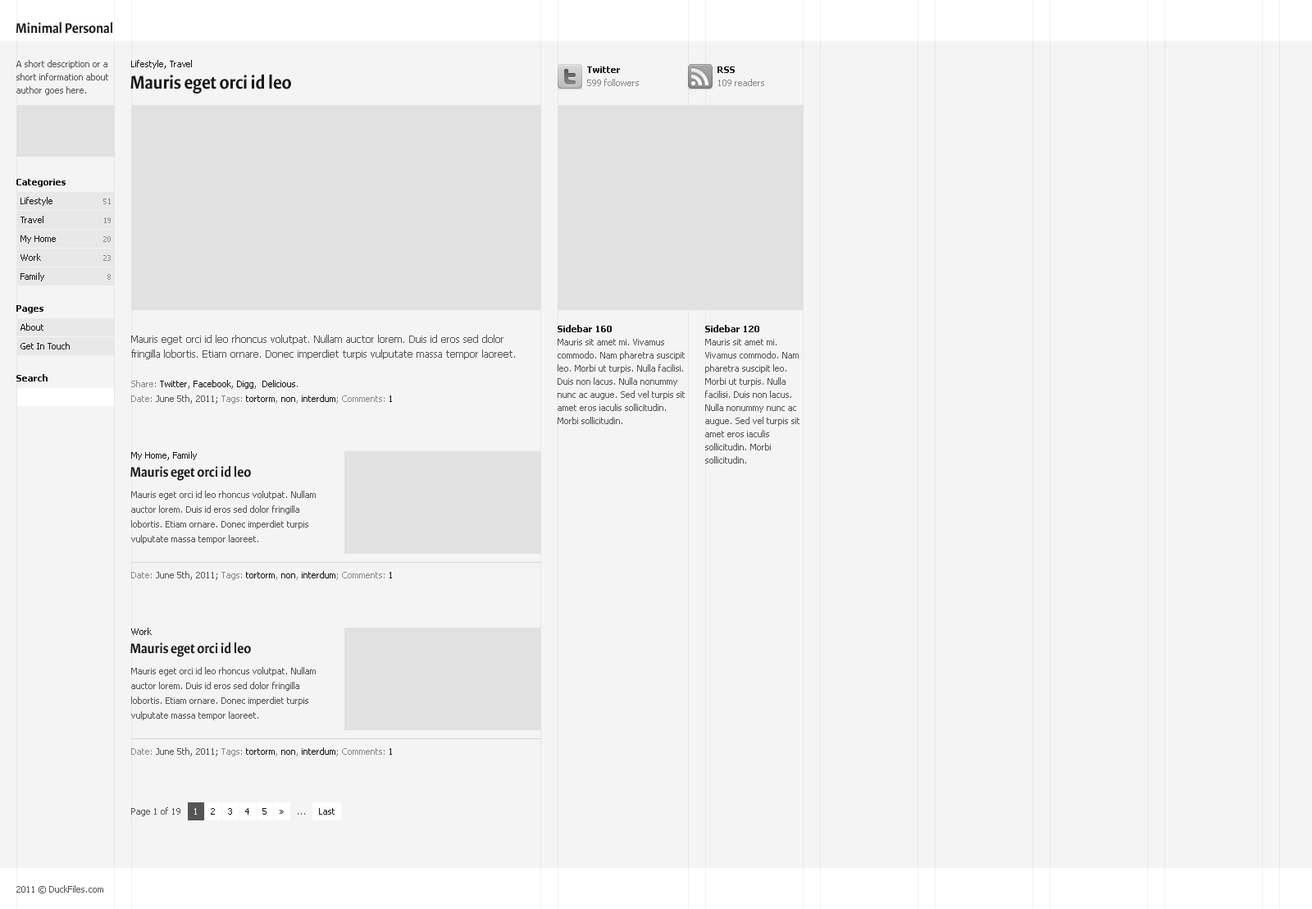
<style>
.page{position:relative;width:1312px;height:909px;background:#f4f4f4}
.page>*{position:absolute;margin:0}
.t1{font:14.8px "VersaSansCon-SemiBold-Regular";color:#191919}
.t2{font:9px/13.1px "Tahoma";color:#555555}
.t3{font:9px/13.1px "Tahoma-Bold";color:#191919}
.t4{font:9px/18.9px "Tahoma";color:#191919}
.t5{font:9px/18.9px "Tahoma-Bold";color:#191919}
.t6{font:9px "Tahoma";color:#191919}
.t7{font:19.7px "VersaSansCon-SemiBold-Regular";color:#191919}
.t8{font:9px/13.1px "Tahoma";color:#888888}
.t9{font:8.2px/18.9px "Tahoma";color:#888888}
.t10{font:9.8px/14.8px "Tahoma";color:#555555}
.t11{font:9px/14.8px "Tahoma";color:#888888}
.t12{font:9px/14.8px "Tahoma";color:#191919}
.t13{font:9px/14.8px "Tahoma";color:#555555}
.t14{font:9px "Tahoma";color:#888888}
.t15{font:9px "Tahoma";color:#555555}
.t16{font:9px "Tahoma";color:#ffffff}
</style>
<div class="page">
<p class="t1" style="left:16px;top:22px;width:97px;height:12px">Minimal Personal</p>
<p class="t2" style="left:16px;top:60px;width:92px;height:321px">A short description or a <br>short information about <br>author goes here.<br><br><span class="t3"><br><br><br><br><br>Categories<br></span><span class="t4">Lifestyle<br>Travel<br>My Home<br>Work<br>Family<br><br></span><span class="t5">Pages<br></span><span class="t4">About<br>Get In Touch<br><br></span><span class="t5">Search</span></p>
<p class="t6" style="left:131px;top:60px;width:61px;height:9px">Lifestyle, Travel</p>
<p class="t7" style="left:130px;top:74px;width:161px;height:19px">Mauris eget orci id leo</p>
<p class="t8" style="left:587px;top:66px;width:52px;height:20px"><span class="t3">Twitter<br></span>599 followers</p>
<p class="t8" style="left:718px;top:66px;width:46px;height:20px"><span class="t3">RSS</span><br>109 readers</p>
<p class="t9" style="left:103px;top:198px;width:8px;height:82px;text-align:right">51<br>19<br>20<br>23<br>8</p>
<p class="t2" style="left:558px;top:325px;width:127px;height:99px"><span class="t3">Sidebar 160<br></span>Mauris sit amet mi. Vivamus commodo. Nam pharetra suscipit leo. Morbi ut turpis. Nulla facilisi. Duis non lacus. Nulla nonummy nunc ac augue. Sed vel turpis sit amet eros iaculis sollicitudin. Morbi sollicitudin.</p>
<p class="t2" style="left:705px;top:325px;width:95px;height:138px"><span class="t3">Sidebar 120<br></span>Mauris sit amet mi. Vivamus commodo. Nam pharetra suscipit leo. Morbi ut turpis. Nulla facilisi. Duis non lacus. Nulla nonummy nunc ac augue. Sed vel turpis sit amet eros iaculis sollicitudin. Morbi sollicitudin.</p>
<p class="t10" style="left:131px;top:335px;width:384px;height:69px">Mauris eget orci id leo rhoncus volutpat. Nullam auctor lorem. Duis id eros sed dolor <br>fringilla lobortis. Etiam ornare. Donec imperdiet turpis vulputate massa tempor laoreet. <br><br><span class="t11">Share: </span><span class="t12">Twitter</span><span class="t13">,</span><span class="t12"> Facebook</span><span class="t13">,</span><span class="t12"> Digg</span><span class="t13">,</span><span class="t12">  Delicious</span><span class="t13">.<br></span><span class="t14">Date: </span><span class="t15">June 5th, 2011</span><span class="t13">; </span><span class="t14">Tags: </span><span class="t6">tortorm</span><span class="t14">, </span><span class="t6">non</span><span class="t14">, </span><span class="t6">interdum</span><span class="t14">; </span><span class="t11">Comments: </span><span class="t12">1</span></p>
<p class="t6" style="left:131px;top:451px;width:66px;height:9px">My Home, Family</p>
<p class="t1" style="left:130px;top:466px;width:121px;height:15px">Mauris eget orci id leo</p>
<p class="t13" style="left:131px;top:490px;width:185px;height:54px">Mauris eget orci id leo rhoncus volutpat. Nullam <br>auctor lorem. Duis id eros sed dolor fringilla <br>lobortis. Etiam ornare. Donec imperdiet turpis <br>vulputate massa tempor laoreet.</p>
<p class="t15" style="left:131px;top:571px;width:261px;height:9px"><span class="t14">Date: </span>June 5th, 2011; <span class="t14">Tags: </span><span class="t6">tortorm</span><span class="t14">, </span><span class="t6">non</span><span class="t14">, </span><span class="t6">interdum</span><span class="t14">; </span><span class="t14">Comments: </span><span class="t6">1</span></p>
<p class="t6" style="left:131px;top:627px;width:21px;height:8px">Work</p>
<p class="t1" style="left:130px;top:642px;width:121px;height:15px">Mauris eget orci id leo</p>
<p class="t13" style="left:131px;top:667px;width:185px;height:53px">Mauris eget orci id leo rhoncus volutpat. Nullam <br>auctor lorem. Duis id eros sed dolor fringilla <br>lobortis. Etiam ornare. Donec imperdiet turpis <br>vulputate massa tempor laoreet.</p>
<p class="t15" style="left:131px;top:747px;width:261px;height:9px"><span class="t14">Date: </span>June 5th, 2011; <span class="t14">Tags: </span><span class="t6">tortorm</span><span class="t14">, </span><span class="t6">non</span><span class="t14">, </span><span class="t6">interdum</span><span class="t14">; </span><span class="t14">Comments: </span><span class="t6">1</span></p>
<p class="t6" style="left:194px;top:808px;width:141px;height:6px"><span class="t16">1</span>     2     3     4     5     »     <span class="t15">...</span>     Last</p>
<p class="t15" style="left:16px;top:885px;width:87px;height:8px">2011 © DuckFiles.com</p>
</div>
